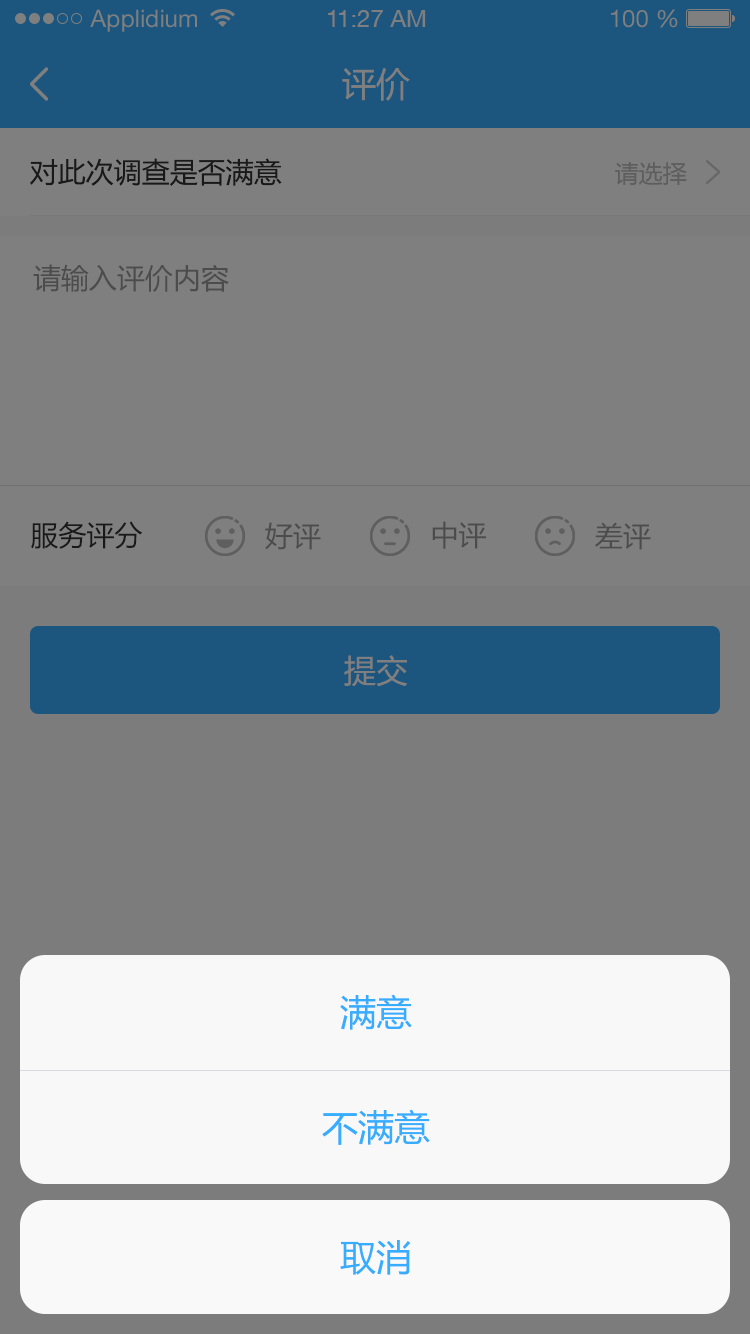
<style>
.page{position:relative;width:750px;height:1334px;background:#7f7f7f}
.page>*{position:absolute;margin:0}
.t1{font:24px "HelveticaNeueLTStd-Roman";color:#7f7f7f}
.t2{font:24px "HelveticaNeueCE-Roman";color:#7f7f7f}
.t3{font:34px "MicrosoftYaHei";color:#7f7f7f}
.t4{font:28px "MicrosoftYaHei";color:#191919}
.t5{font:24px "MicrosoftYaHei";color:#5e5e5e}
.t6{font:28px "MicrosoftYaHei";color:#4c4c4c}
.t7{font:32px "MicrosoftYaHei";color:#7f7f7f}
.t8{font:36px "MicrosoftYaHei";color:#38adff}
</style>
<div class="page">
<p class="t1" style="left:90px;top:9px;width:107px;height:23px">Applidium</p>
<p class="t2" style="left:328px;top:10px;width:98px;height:17px">11:27 AM</p>
<p class="t1" style="left:611px;top:9px;width:67px;height:19px">100 %</p>
<p class="t3" style="left:342px;top:68px;width:68px;height:33px">评价</p>
<p class="t4" style="left:30px;top:158px;width:252px;height:28px">对此次调查是否满意</p>
<p class="t5" style="left:615px;top:162px;width:72px;height:23px">请选择</p>
<p class="t6" style="left:33px;top:264px;width:196px;height:28px">请输入评价内容</p>
<p class="t4" style="left:31px;top:521px;width:112px;height:28px">服务评分</p>
<p class="t6" style="left:432px;top:521px;width:54px;height:28px">中评</p>
<p class="t6" style="left:265px;top:522px;width:56px;height:28px">好评</p>
<p class="t6" style="left:595px;top:522px;width:56px;height:28px">差评</p>
<p class="t7" style="left:344px;top:655px;width:63px;height:32px">提交</p>
<p class="t8" style="left:340px;top:994px;width:72px;height:36px">满意</p>
<p class="t8" style="left:322px;top:1109px;width:108px;height:36px">不满意</p>
<p class="t8" style="left:340px;top:1240px;width:71px;height:35px">取消</p>
</div>
